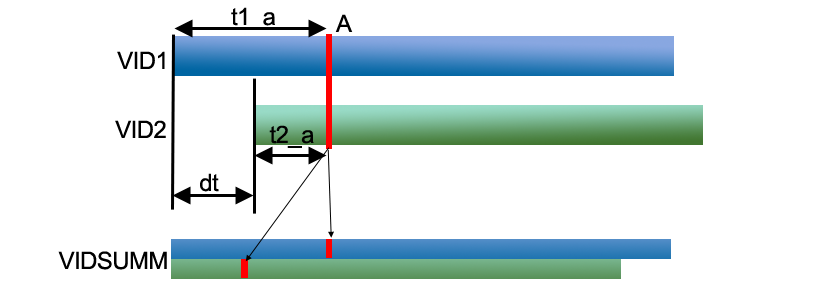
<style>
.page{position:relative;width:813px;height:300px;background:#ffffff}
.page>*{position:absolute;margin:0}
.t1{font:24px "ArialMT";letter-spacing:-0.025em;color:#000000}
</style>
<div class="page">
<p class="t1" style="left:231px;top:7px;width:44px;height:23px">t1_a</p>
<p class="t1" style="left:335px;top:14px;width:18px;height:18px">A</p>
<p class="t1" style="left:117px;top:51px;width:48px;height:18px">VID1</p>
<p class="t1" style="left:115px;top:120px;width:51px;height:18px">VID2</p>
<p class="t1" style="left:269px;top:125px;width:45px;height:23px">t2_a</p>
<p class="t1" style="left:200px;top:173px;width:19px;height:19px">dt</p>
<p class="t1" style="left:58px;top:251px;width:109px;height:19px">VIDSUMM</p>
</div>
